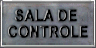
<style>
.page{position:relative;width:96px;height:48px}
.page>*{position:absolute;margin:0}
.t1{font:16px/16.5px "Arial-BoldMT";font-weight:bold;scale:0.87 1}
</style>
<div class="page">
<p class="t1" style="left:8px;top:9px;width:80px;height:29px;text-align:center">SALA DE <br>CONTROLE</p>
</div>
